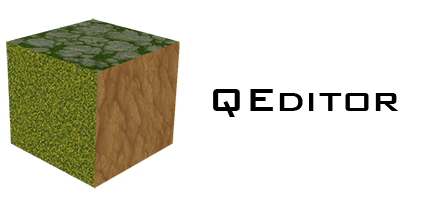
<style>
.page{position:relative;width:434px;height:210px;background:#ffffff}
.page>*{position:absolute;margin:0}
.t1{font:42px "BankGothicBT-Medium";color:#000000}
</style>
<div class="page">
<p class="t1" style="left:213px;top:89px;width:186px;height:28px">QEditor</p>
</div>
